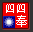
<style>
.page{position:relative;width:33px;height:32px;background:#f20000}
.page>*{position:absolute;margin:0}
.t1{font:10.4px "SimSun";color:#ffffff}
.t2{font:11.7px "SimSun";color:#ffffff}
</style>
<div class="page">
<p class="t1" style="left:6px;top:4px;width:19px;height:9px">四四</p>
<p class="t2" style="left:16px;top:15px;width:11px;height:12px">奉</p>
</div>
